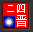
<style>
.page{position:relative;width:33px;height:32px;background:#f20000}
.page>*{position:absolute;margin:0}
.t1{font:10.4px "SimSun";color:#ffffff}
.t2{font:11.7px "SimSun";color:#ffffff}
</style>
<div class="page">
<p class="t1" style="left:7px;top:4px;width:18px;height:9px">二四</p>
<p class="t2" style="left:16px;top:15px;width:11px;height:12px">晋</p>
</div>
